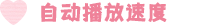
<style>
.page{position:relative;width:219px;height:25px;background:#ffffff}
.page>*{position:absolute;margin:0}
.t1{font:21.2px "shetumodengxiaofangti";color:#ef8299;font-weight:bold}
</style>
<div class="page">
<p class="t1" style="left:41px;top:2px;width:126px;height:20px">自动播放速度</p>
</div>
